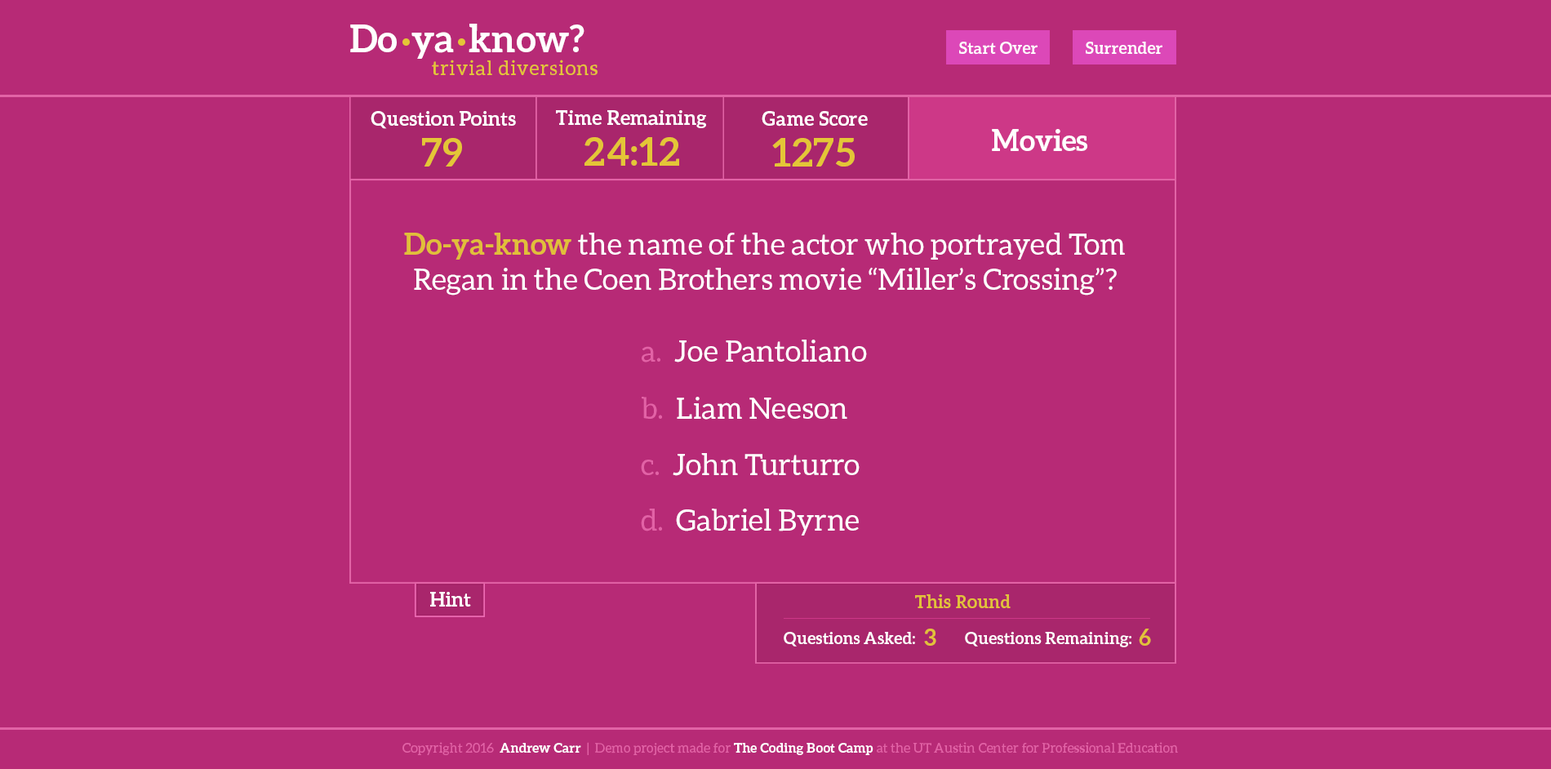
<style>
.page{position:relative;width:1551px;height:769px;background:#b72a76}
.page>*{position:absolute;margin:0}
.t1{font:37.9px "Aleo-Bold";color:#ffffff}
.t2{font:16.3px "Aleo-Bold";letter-spacing:0.01em;color:#ffffff}
.t3{font:19.6px "Aleo-Regular";letter-spacing:0.05em;color:#e4c637}
.t4{font:19.6px "Aleo-Bold";letter-spacing:0.01em;color:#ffffff}
.t5{font:19.7px "Aleo-Bold";letter-spacing:0.01em;color:#ffffff}
.t6{font:39.2px "Aleo-Bold";letter-spacing:0.01em;color:#e4c637}
.t7{font:39.4px "Aleo-Bold";letter-spacing:0.025em;color:#e4c637}
.t8{font:29.4px "Aleo-Bold";color:#ffffff}
.t9{font:29.4px "Aleo-Regular";color:#ffffff}
.t10{font:29.4px "Aleo-Bold";color:#e1bf3a}
.t11{font:29.4px "Aleo-Regular";color:#fffeff}
.t12{font:29.4px "Aleo-Regular";color:#e262a6}
.t13{font:19.6px "Aleo-Bold";color:#ffffff}
.t14{font:18px "Aleo-Bold";letter-spacing:0.01em;color:#e2c13a}
.t15{font:22.9px "Aleo-Bold";letter-spacing:0.01em;color:#e2c13a}
.t16{font:16.4px "Aleo-Bold";letter-spacing:0.01em;color:#ffffff}
.t17{font:13.1px "Aleo-Regular";letter-spacing:0.01em;color:#e262a6}
.t18{font:13.1px "Aleo-Bold";letter-spacing:0.01em;color:#ffffff}
</style>
<div class="page">
<p class="t1" style="left:350px;top:24px;width:234px;height:35px">Do ya know?</p>
<p class="t2" style="left:959px;top:42px;width:78px;height:13px">Start Over</p>
<p class="t2" style="left:1086px;top:42px;width:76px;height:12px">Surrender</p>
<p class="t3" style="left:432px;top:60px;width:165px;height:16px">trivial diversions</p>
<p class="t4" style="left:371px;top:111px;width:145px;height:18px">Question Points</p>
<p class="t5" style="left:556px;top:110px;width:150px;height:18px">Time Remaining</p>
<p class="t4" style="left:762px;top:111px;width:106px;height:16px">Game Score</p>
<p class="t6" style="left:422px;top:138px;width:40px;height:29px">79</p>
<p class="t7" style="left:584px;top:137px;width:95px;height:29px">24:12</p>
<p class="t6" style="left:772px;top:138px;width:83px;height:29px">1275</p>
<p class="t8" style="left:992px;top:129px;width:95px;height:22px">Movies</p>
<p class="t9" style="left:404px;top:233px;width:721px;height:62px;text-align:center"><span class="t10">Do-ya-know</span> the name of the actor who portrayed Tom Regan in the Coen Brothers movie “Miller’s Crossing”?</p>
<p class="t11" style="left:642px;top:340px;width:225px;height:22px"><span class="t12">a.  </span>Joe Pantoliano</p>
<p class="t9" style="left:642px;top:397px;width:205px;height:23px"><span class="t12">b.  </span>Liam Neeson</p>
<p class="t9" style="left:641px;top:453px;width:218px;height:23px"><span class="t12">c.</span>  John Turturro</p>
<p class="t9" style="left:641px;top:509px;width:218px;height:26px"><span class="t12">d.  </span>Gabriel Byrne</p>
<p class="t13" style="left:430px;top:592px;width:41px;height:14px">Hint</p>
<p class="t14" style="left:915px;top:594px;width:95px;height:14px">This Round</p>
<p class="t15" style="left:924px;top:629px;width:12px;height:17px">3</p>
<p class="t15" style="left:1139px;top:629px;width:12px;height:17px">6</p>
<p class="t16" style="left:784px;top:632px;width:131px;height:14px">Questions Asked:</p>
<p class="t16" style="left:965px;top:632px;width:166px;height:15px">Questions Remaining:</p>
<p class="t17" style="left:402px;top:742px;width:776px;height:13px">Copyright 2016  <span class="t18">Andrew Carr</span>  |  Demo project made for <span class="t18">The Coding Boot Camp</span> at the UT Austin Center for Professional Education</p>
</div>
